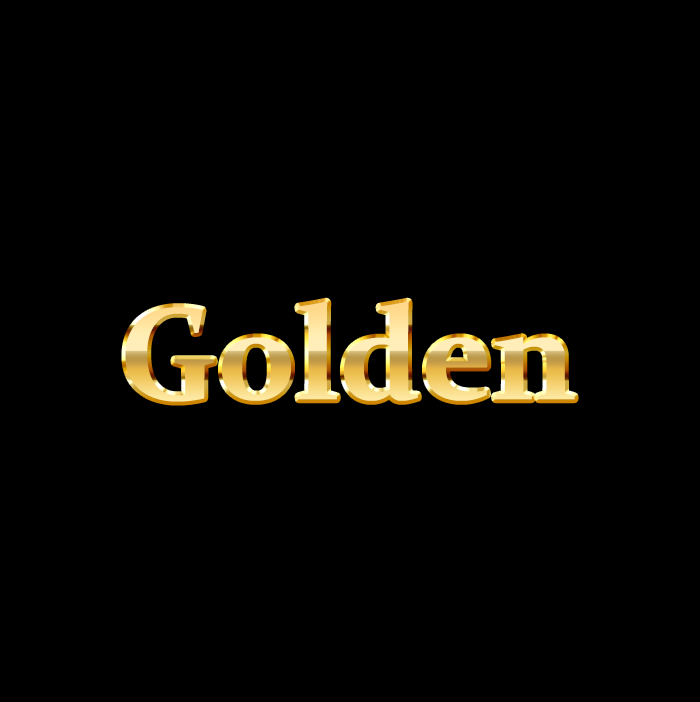
<style>
.page{position:relative;width:700px;height:702px;background:#000000}
.page>*{position:absolute;margin:0}
.t1{font:132px "Constantia-Bold"}
</style>
<div class="page">
<p class="t1" style="left:125px;top:301px;width:450px;height:101px">Golden</p>
</div>
